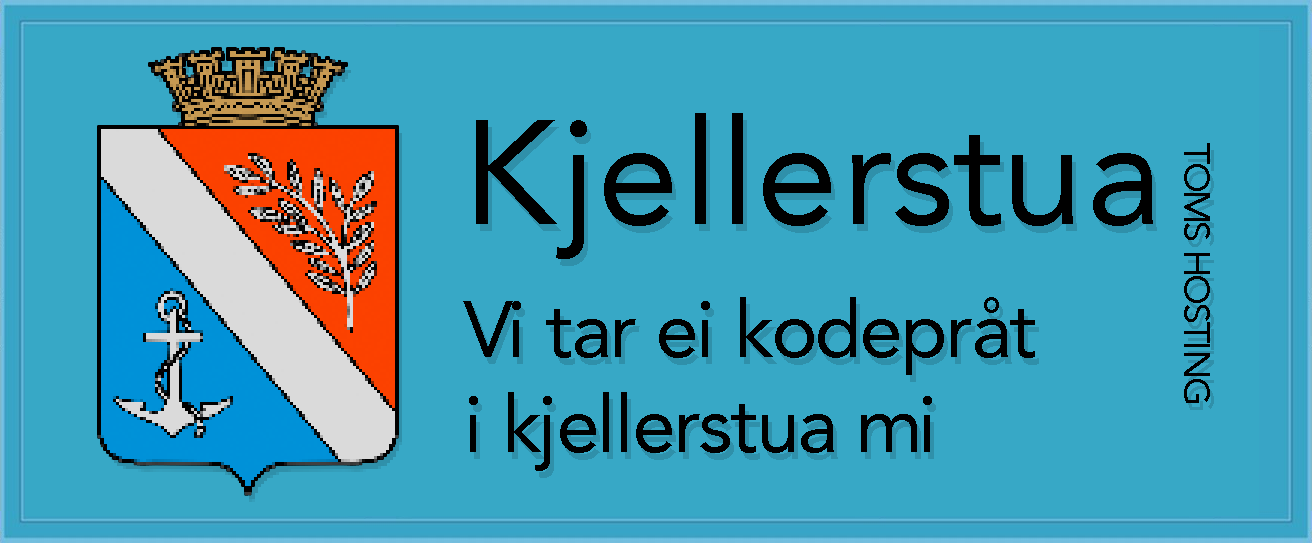
<style>
.page{position:relative;width:1312px;height:543px;background:#37a8c6}
.page>*{position:absolute;margin:0}
.t1{font:146.7px "Avenir-Roman";color:#000000}
.t2{font:36.7px "Avenir-Roman";color:#000000}
.t3{font:79px "Avenir-Roman";color:#000000}
</style>
<div class="page">
<p class="t1" style="left:476px;top:113px;width:677px;height:146px">Kjellerstua</p>
<p class="t2" style="left:1184px;top:143px;width:26px;height:260px;rotate:90deg">TOMS HOSTING</p>
<p class="t3" style="left:463px;top:297px;width:572px;height:174px">Vi tar ei kodepråt<br>i kjellerstua mi</p>
</div>
